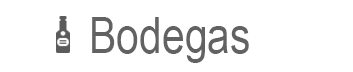
<style>
.page{position:relative;width:353px;height:72px;background:#ffffff}
.page>*{position:absolute;margin:0}
.t1{font:50px "ArialNarrow";color:#626262}
</style>
<div class="page">
<p class="t1" style="left:92px;top:17px;width:157px;height:46px">Bodegas</p>
</div>
